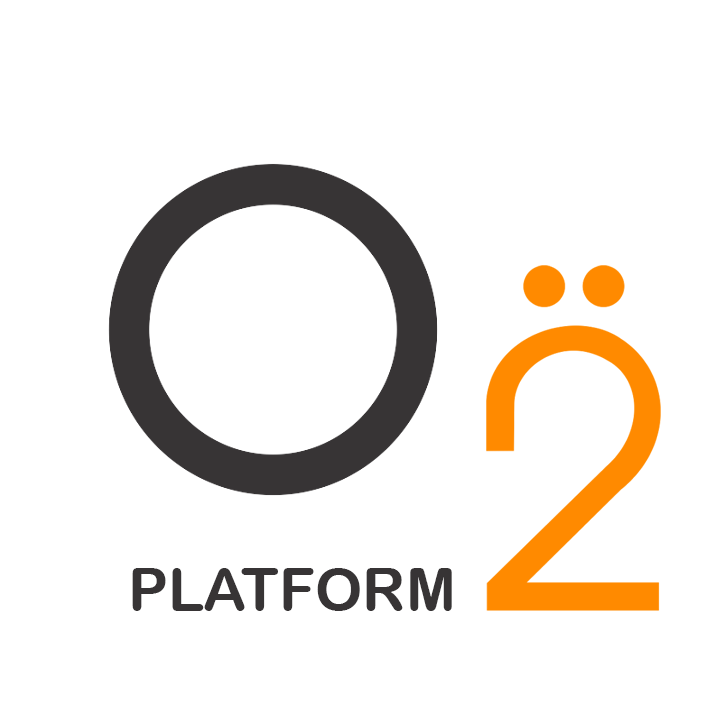
<style>
.page{position:relative;width:719px;height:719px;background:#ffffff}
.page>*{position:absolute;margin:0}
.t1{font:60px "ArialRoundedMTBold";color:#373435}
</style>
<div class="page">
<p class="t1" style="left:132px;top:568px;width:320px;height:43px">PLATFORM</p>
</div>
